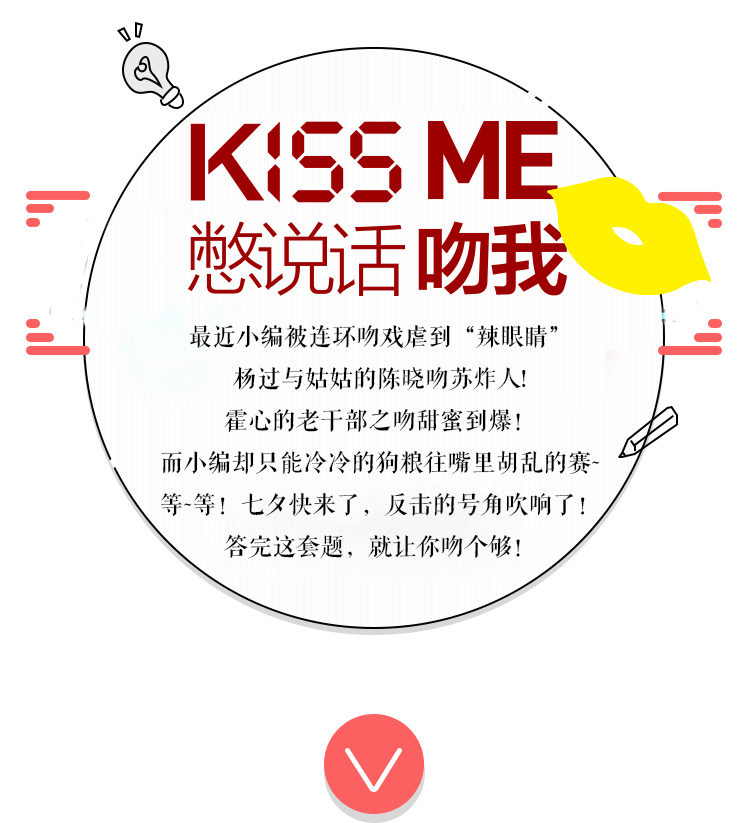
<style>
.page{position:relative;width:750px;height:823px;background:#ffffff}
.page>*{position:absolute;margin:0}
.t1{font:24px "FZQKBYSJW--GB1-0";color:#000000}
</style>
<div class="page">
<p class="t1" style="left:161px;top:325px;width:439px;height:234px;text-align:center">最近小编被连环吻戏虐到“辣眼睛”<br>杨过与姑姑的陈晓吻苏炸人!<br>霍心的老干部之吻甜蜜到爆！<br>而小编却只能冷冷的狗粮往嘴里胡乱的赛~<br>等~等！七夕快来了，反击的号角吹响了！<br>答完这套题，就让你吻个够！</p>
</div>
